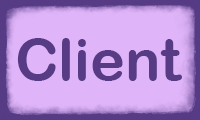
<style>
.page{position:relative;width:200px;height:120px;background:#dfb4f8}
.page>*{position:absolute;margin:0}
.t1{font:58.7px "ArialRoundedMTBold";color:#573c85}
</style>
<div class="page">
<p class="t1" style="left:17px;top:38px;width:165px;height:43px">Client</p>
</div>
